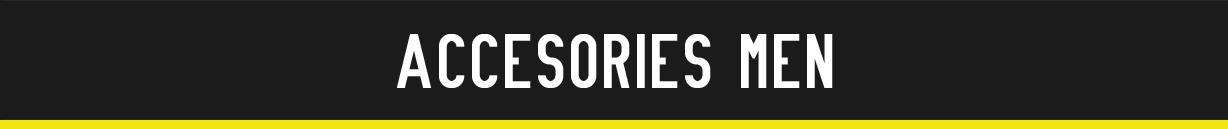
<style>
.page{position:relative;width:1228px;height:129px;background:#1c1b1b}
.page>*{position:absolute;margin:0}
.t1{font:70.8px "Nue-Gothic";letter-spacing:0.05em;color:#ffffff;font-weight:bold}
</style>
<div class="page">
<p class="t1" style="left:397px;top:34px;width:436px;height:54px">ACCESORIES MEN</p>
</div>
